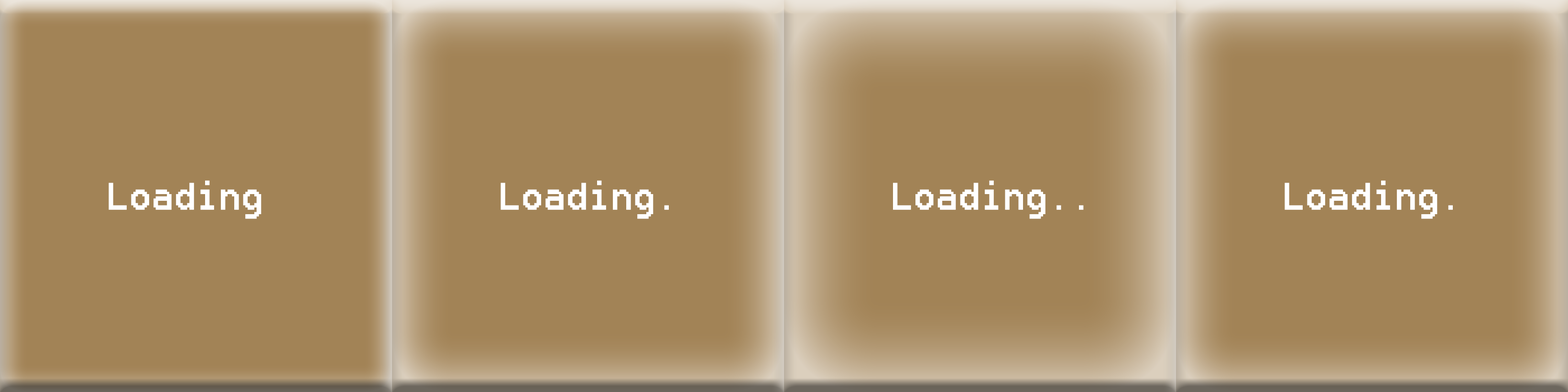
<style>
.page{position:relative;width:1568px;height:392px;background:#a28356}
.page>*{position:absolute;margin:0}
.t1{font:47.8px "8514oem";color:#ffffff}
</style>
<div class="page">
<p class="t1" style="left:109px;top:180px;width:152px;height:39px">Loading</p>
<p class="t1" style="left:501px;top:180px;width:168px;height:39px">Loading.</p>
<p class="t1" style="left:893px;top:180px;width:191px;height:39px">Loading..</p>
<p class="t1" style="left:1285px;top:180px;width:168px;height:39px">Loading.</p>
</div>
